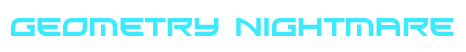
<style>
.page{position:relative;width:466px;height:52px;background:#ffffff}
.page>*{position:absolute;margin:0}
.t1{font:24px "Xirod";color:#3de9fd}
</style>
<div class="page">
<p class="t1" style="left:11px;top:18px;width:443px;height:18px">geometry nIghtmare</p>
</div>
